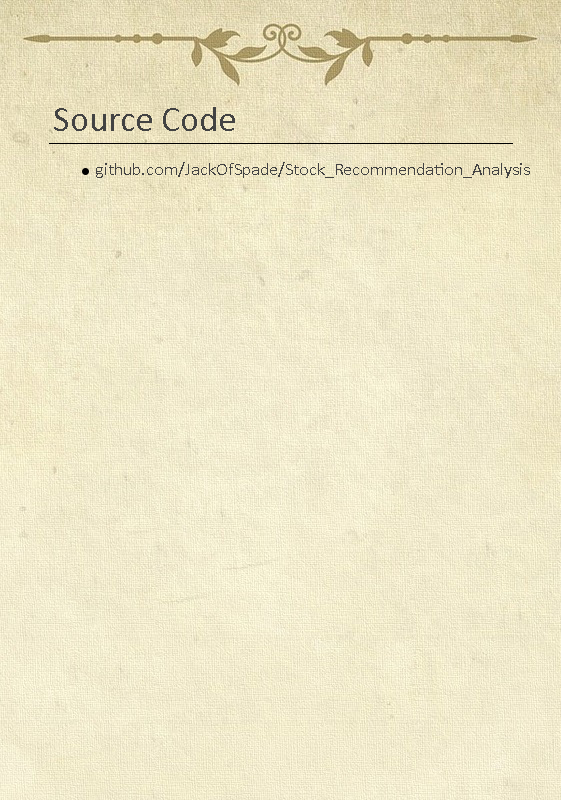
<style>
.page{position:relative;width:561px;height:800px}
.page>*{position:absolute;margin:0}
.t1{font:36px "Calibri";color:#434343}
.t2{font:18px "Calibri";color:#434343}
</style>
<div class="page">
<p class="t1" style="left:54px;top:107px;width:181px;height:24px">Source Code</p>
<p class="t2" style="left:96px;top:162px;width:434px;height:16px">github.com/JackOfSpade/Stock_Recommendation_Analysis</p>
</div>
